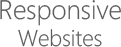
<style>
.page{position:relative;width:121px;height:47px;background:#ffffff}
.page>*{position:absolute;margin:0}
.t1{font:26.6px "SegoeWPN-Light";color:#5c5b5b}
.t2{font:22.6px "SegoeWPN-Light";color:#5c5b5b}
</style>
<div class="page">
<p class="t1" style="left:0px;top:0px;width:121px;height:47px;text-align:center">Responsive<br><span class="t2">Websites</span></p>
</div>
